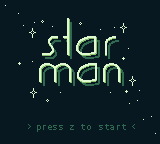
<style>
.page{position:relative;width:160px;height:144px;background:#071821}
.page>*{position:absolute;margin:0}
.t1{font:50px/27px "GuildofProfessionalActors";color:#e0f8cf}
.t2{font:50px/27px "GuildofProfessionalActors"}
.t3{font:9px "AndaleMono";color:#306850}
.t4{font:9px "AndaleMono";letter-spacing:0.075em;color:#306850}
.t5{font:9px "AndaleMono";letter-spacing:0.1em;color:#306850}
.t6{font:9px "AndaleMono";letter-spacing:0.2em;color:#306850}
.t7{font:9px "AndaleMono";letter-spacing:0.05em;color:#306850}
.t8{font:9px "AndaleMono";letter-spacing:-0.005em;color:#306850}
</style>
<div class="page">
<p class="t1" style="left:39px;top:18px;width:81px;height:64px;text-align:center">Star<br>Man</p>
<p class="t2" style="left:40px;top:19px;width:81px;height:64px;text-align:center">Star<br>Man</p>
<p class="t3" style="left:28px;top:124px;width:107px;height:8px">&gt; p<span class="t4">r</span><span class="t5">es</span><span class="t4">s</span> z <span class="t6">to</span> s<span class="t6">t</span><span class="t7">a</span><span class="t8">rt</span> &lt;</p>
</div>
